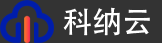
<style>
.page{position:relative;width:162px;height:43px;background:#333333}
.page>*{position:absolute;margin:0}
.t1{font:30px "AdobeHeitiStd-Regular";color:#ffffff}
</style>
<div class="page">
<p class="t1" style="left:63px;top:7px;width:87px;height:29px">科纳云</p>
</div>
